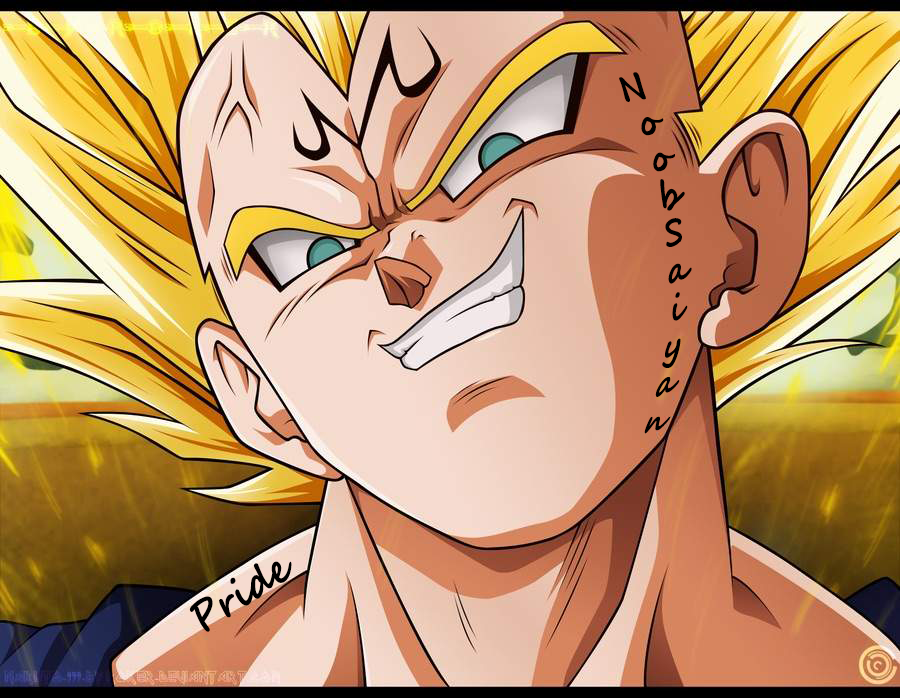
<style>
.page{position:relative;width:900px;height:698px}
.page>*{position:absolute;margin:0}
.t1{font:34.3px "SegoeScript-Bold";color:#000000}
.t2{font:40.6px "SegoeScript-Bold";letter-spacing:0.005em;color:#000000;scale:0.89 1}
</style>
<div class="page">
<p class="t1" style="left:619px;top:72px;width:73px;height:362px;rotate:-5deg">NoobSaiyan</p>
<p class="t2" style="left:189px;top:561px;width:103px;height:71px;rotate:-31deg">Pride</p>
</div>
